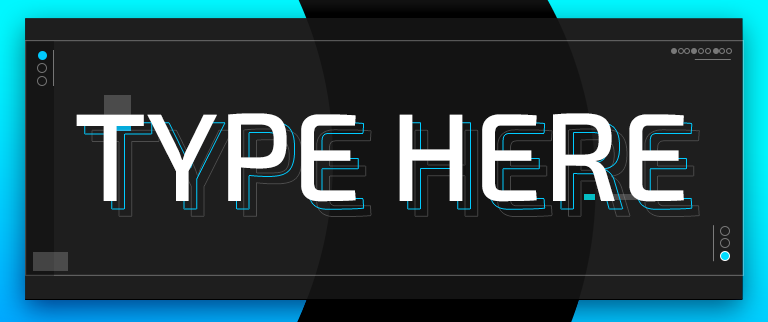
<style>
.page{position:relative;width:768px;height:322px;background:#1e1e1e}
.page>*{position:absolute;margin:0}
.t1{font:124.5px "Exo2-Medium";color:#ffffff;text-transform:uppercase}
</style>
<div class="page">
<p class="t1" style="left:76px;top:113px;width:608px;height:89px">TYPE HERE</p>
</div>
